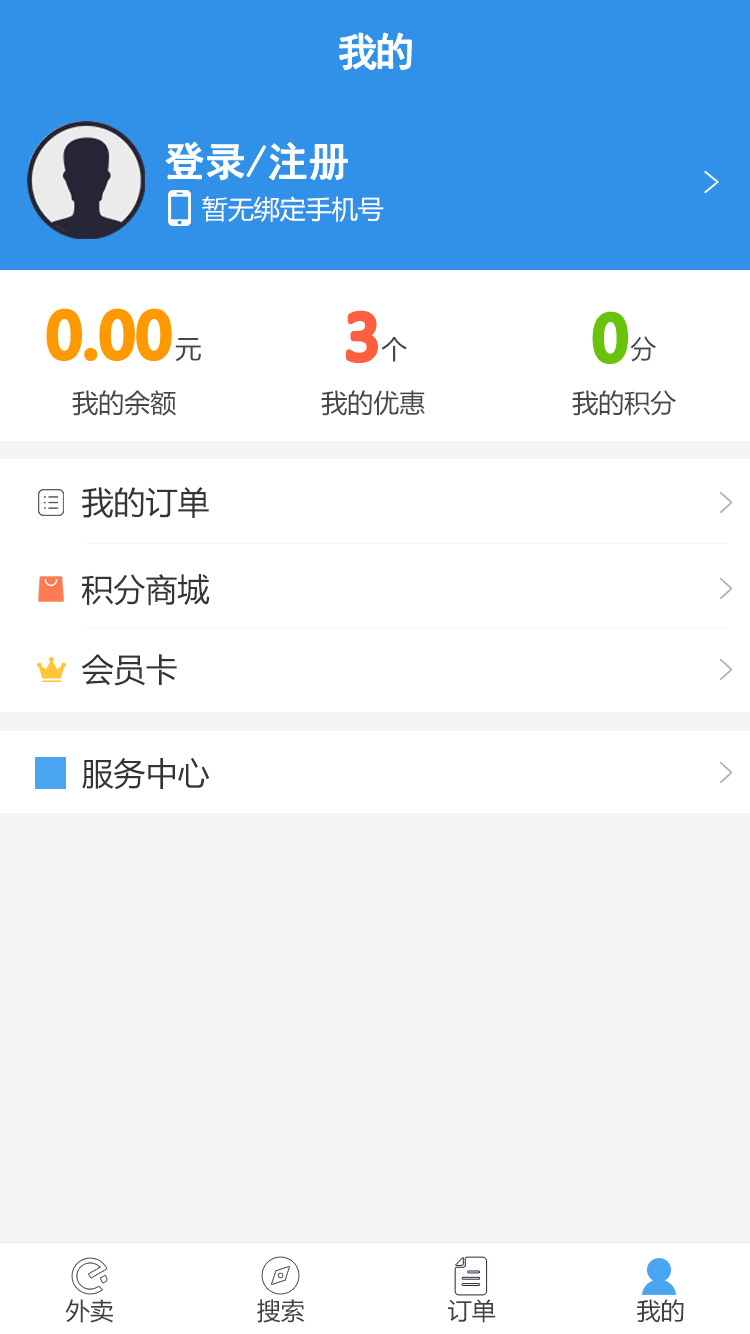
<style>
.page{position:relative;width:750px;height:1334px;background:#ffffff}
.page>*{position:absolute;margin:0}
.t1{font:40px "SimHei";letter-spacing:-0.1em;color:#ffffff;font-weight:bold}
.t2{font:40px "SimHei";color:#ffffff;font-weight:bold}
.t3{font:26px "MicrosoftYaHei";color:#ffffff}
.t4{font:60px "MicrosoftYaHei";color:#ff9900;font-weight:bold}
.t5{font:60px "MicrosoftYaHei";color:#ff5f3f;font-weight:bold}
.t6{font:60px "MicrosoftYaHei";color:#6ac20b;font-weight:bold}
.t7{font:26px "MicrosoftYaHei";color:#474747}
.t8{font:32px "MicrosoftYaHei";color:#343434}
.t9{font:24px "MicrosoftYaHei";color:#414141}
</style>
<div class="page">
<p class="t1" style="left:339px;top:33px;width:73px;height:37px">我的</p>
<p class="t2" style="left:166px;top:142px;width:182px;height:38px">登录/注册</p>
<p class="t3" style="left:202px;top:196px;width:182px;height:26px">暂无绑定手机号</p>
<p class="t4" style="left:49px;top:311px;width:121px;height:48px">0.00</p>
<p class="t5" style="left:348px;top:313px;width:28px;height:48px">3</p>
<p class="t6" style="left:595px;top:314px;width:31px;height:48px">0</p>
<p class="t7" style="left:175px;top:338px;width:26px;height:24px">元</p>
<p class="t7" style="left:381px;top:337px;width:26px;height:25px">个</p>
<p class="t7" style="left:630px;top:336px;width:26px;height:26px">分</p>
<p class="t7" style="left:72px;top:390px;width:104px;height:26px">我的余额</p>
<p class="t7" style="left:321px;top:390px;width:104px;height:26px">我的优惠</p>
<p class="t7" style="left:572px;top:390px;width:104px;height:26px">我的积分</p>
<p class="t8" style="left:82px;top:487px;width:127px;height:31px">我的订单</p>
<p class="t8" style="left:81px;top:574px;width:129px;height:32px">积分商城</p>
<p class="t8" style="left:81px;top:654px;width:96px;height:32px">会员卡</p>
<p class="t8" style="left:82px;top:757px;width:128px;height:33px">服务中心</p>
<p class="t9" style="left:65px;top:1299px;width:48px;height:24px">外卖</p>
<p class="t9" style="left:257px;top:1299px;width:48px;height:24px">搜索</p>
<p class="t9" style="left:448px;top:1299px;width:48px;height:24px">订单</p>
<p class="t9" style="left:637px;top:1299px;width:47px;height:24px">我的</p>
</div>
